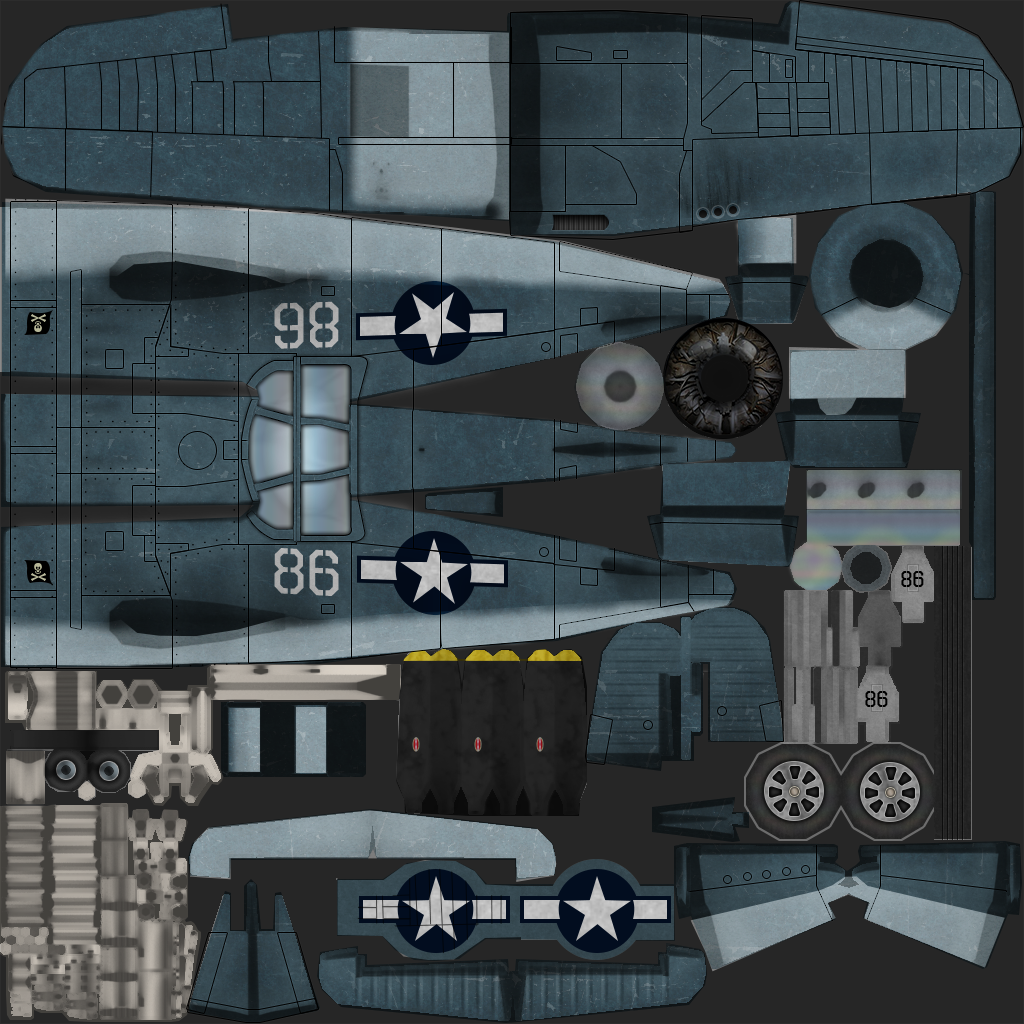
<style>
.page{position:relative;width:1024px;height:1024px}
.page>*{position:absolute;margin:0}
.t1{font:65px "OctinStencilRg-Regular";color:#a8a8a8}
.t2{font:65px "OctinStencilRg-Regular";color:#acacac}
.t3{font:22px "OctinStencilRg-Regular";color:#000000}
</style>
<div class="page">
<p class="t1" style="left:274px;top:301px;width:65px;height:48px;rotate:178deg">86</p>
<p class="t2" style="left:274px;top:548px;width:65px;height:48px;rotate:3deg">86</p>
<p class="t3" style="left:901px;top:571px;width:23px;height:16px">86</p>
<p class="t3" style="left:865px;top:691px;width:23px;height:16px">86</p>
</div>
